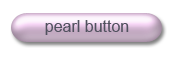
<style>
.page{position:relative;width:175px;height:60px;background:#ffffff}
.page>*{position:absolute;margin:0}
.t1{font:16px "ArialMT";color:#51525f}
</style>
<div class="page">
<p class="t1" style="left:45px;top:20px;width:84px;height:15px">pearl button</p>
</div>
